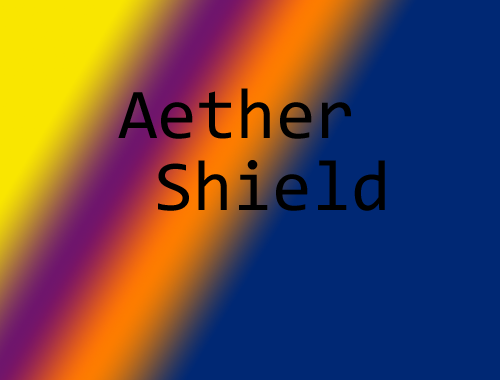
<style>
.page{position:relative;width:500px;height:380px;background:#002874}
.page>*{position:absolute;margin:0}
.t1{font:71.7px/71.7px "Consolas";color:#000000}
</style>
<div class="page">
<p class="t1" style="left:118px;top:88px;width:267px;height:123px">Aether<br> Shield</p>
</div>
